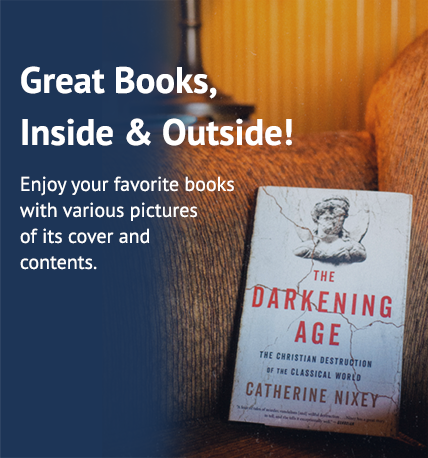
<style>
.page{position:relative;width:428px;height:458px;background:#1d3557}
.page>*{position:absolute;margin:0}
.t1{font:20px/26px "PTSans-Regular";color:#ffffff}
.t2{font:36.7px/52px "PTSans-Bold";color:#ffffff}
</style>
<div class="page">
<p class="t1" style="left:20px;top:66px;width:272px;height:204px"><span class="t2">Great Books, <br>Inside &amp; Outside!<br><br></span>Enjoy your favorite books <br>with various pictures <br>of its cover and <br>contents.</p>
</div>
